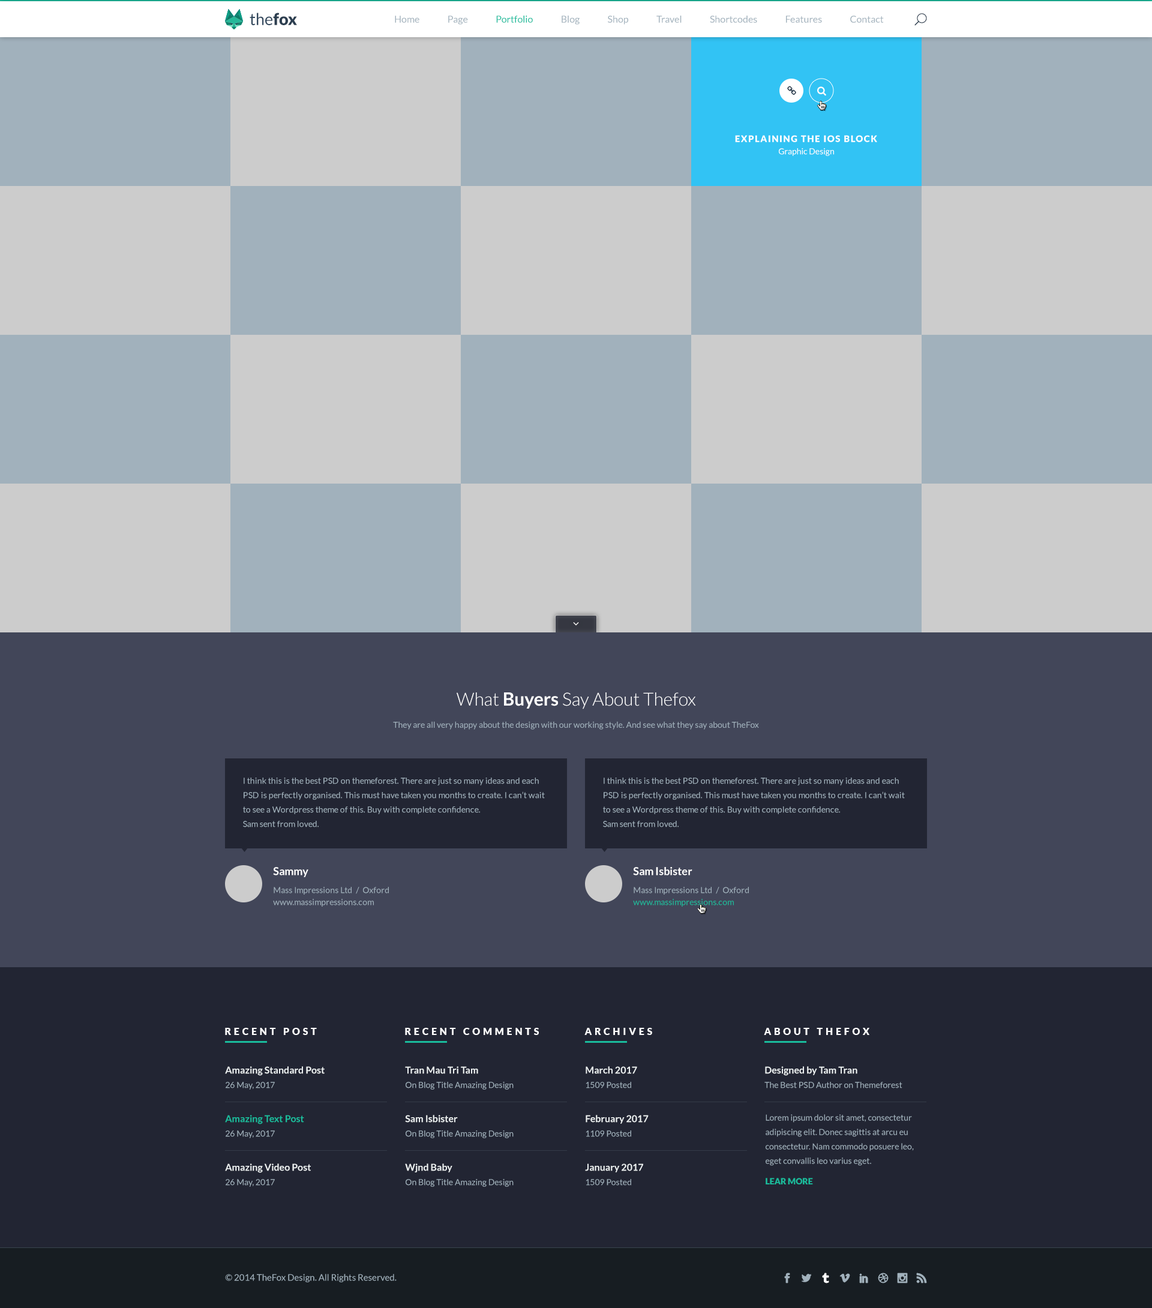
<style>
.page{position:relative;width:1152px;height:1308px;background:#222533}
.page>*{position:absolute;margin:0}
.t1{font:16.3px "Lato-Regular";color:#34495e}
.t2{font:16.3px "Lato-Black";color:#2c3e50}
.t3{font:9.6px "Lato-Regular";color:#a1b1bc}
.t4{font:9.6px "Lato-Regular";color:#1abc9c}
.t5{font:9px "Lato-Black";letter-spacing:0.1em;color:#ffffff;text-transform:uppercase}
.t6{font:8.4px "Lato-Regular";color:#ffffff}
.t7{font:18px "Lato-Light";color:#ffffff}
.t8{font:18px "Lato-Bold";color:#ffffff}
.t9{font:8.4px "Lato-Regular";color:#a1b1bc}
.t10{font:8.4px/14.4px "Lato-Regular";color:#a1b1bc}
.t11{font:8.4px/12px "Lato-Regular";color:#a1b1bc}
.t12{font:10.8px/15.6px "Lato-Bold";color:#ffffff}
.t13{font:10.8px/14.4px "Lato-Bold";color:#ffffff}
.t14{font:8.4px/12px "Lato-Regular";color:#1abc9c}
.t15{font:9.6px "Lato-Black";letter-spacing:0.3em;color:#ffffff}
.t16{font:9.6px/14.4px "Lato-Bold";color:#ecf0f1}
.t17{font:9.6px/14.4px "Lato-Bold";color:#1abc9c}
.t18{font:8.4px "Lato-Black";color:#1abc9c}
.t19{font:9px "Lato-Regular";color:#a1b1bc}
</style>
<div class="page">
<p class="t1" style="left:250px;top:13px;width:47px;height:12px">the<span class="t2">fox</span></p>
<p class="t3" style="left:395px;top:16px;width:489px;height:9px">Home               Page               <span class="t4">Portfolio</span>               Blog               Shop               Travel               Shortcodes               Features               Contact</p>
<p class="t5" style="left:735px;top:135px;width:142px;height:7px">Explaining the iOS Block</p>
<p class="t6" style="left:779px;top:148px;width:55px;height:8px">Graphic Design</p>
<p class="t7" style="left:457px;top:692px;width:239px;height:17px">What <span class="t8">Buyers</span> Say About Thefox</p>
<p class="t9" style="left:393px;top:721px;width:366px;height:9px">They are all very happy about the design with our working style. And see what they say about TheFox</p>
<p class="t10" style="left:243px;top:778px;width:302px;height:49px">I think this is the best PSD on themeforest. There are just so many ideas and each PSD is perfectly organised. This must have taken you months to create. I can’t wait to see a Wordpress theme of this. Buy with complete confidence.<br>Sam sent from loved.</p>
<p class="t10" style="left:603px;top:778px;width:302px;height:49px">I think this is the best PSD on themeforest. There are just so many ideas and each PSD is perfectly organised. This must have taken you months to create. I can’t wait to see a Wordpress theme of this. Buy with complete confidence.<br>Sam sent from loved.</p>
<p class="t11" style="left:273px;top:867px;width:116px;height:40px"><span class="t12">Sammy<br><br></span>Mass Impressions Ltd  /  Oxford<br>www.massimpressions.com</p>
<p class="t11" style="left:633px;top:867px;width:116px;height:40px"><span class="t12">Sam Isbister</span><span class="t13"><br><br></span>Mass Impressions Ltd  /  Oxford<br><span class="t14">www.massimpressions.com</span></p>
<p class="t15" style="left:225px;top:1028px;width:92px;height:7px">RECENT POST</p>
<p class="t15" style="left:405px;top:1028px;width:134px;height:7px">RECENT COMMENTS</p>
<p class="t15" style="left:584px;top:1028px;width:68px;height:7px">ARCHIVES</p>
<p class="t15" style="left:764px;top:1028px;width:105px;height:7px">ABOUT THEFOX</p>
<p class="t16" style="left:225px;top:1066px;width:100px;height:24px">Amazing Standard Post<br><span class="t10">26 May, 2017</span></p>
<p class="t10" style="left:405px;top:1066px;width:109px;height:24px"><span class="t16">Tran Mau Tri Tam<br></span>On Blog Title Amazing Design</p>
<p class="t10" style="left:586px;top:1066px;width:51px;height:22px"><span class="t16">March 2017<br></span>1509 Posted</p>
<p class="t10" style="left:764px;top:1066px;width:138px;height:22px"><span class="t16">Designed by Tam Tran<br></span>The Best PSD Author on Themeforest</p>
<p class="t17" style="left:225px;top:1115px;width:79px;height:23px">Amazing Text Post<br><span class="t10">26 May, 2017</span></p>
<p class="t10" style="left:405px;top:1115px;width:109px;height:23px"><span class="t16">Sam Isbister<br></span>On Blog Title Amazing Design</p>
<p class="t16" style="left:586px;top:1115px;width:63px;height:22px">February 2017<br><span class="t10">1109 Posted</span></p>
<p class="t10" style="left:766px;top:1114px;width:148px;height:52px">Lorem ipsum dolor sit amet, consectetur adipiscing elit. Donec sagittis at arcu eu consectetur. Nam commodo posuere leo, eget convallis leo varius eget.</p>
<p class="t16" style="left:225px;top:1163px;width:86px;height:24px">Amazing Video Post<br><span class="t10">26 May, 2017</span></p>
<p class="t10" style="left:405px;top:1163px;width:109px;height:24px"><span class="t16">Wjnd Baby<br></span>On Blog Title Amazing Design</p>
<p class="t16" style="left:585px;top:1163px;width:58px;height:23px">January 2017<br><span class="t10">1509 Posted</span></p>
<p class="t18" style="left:766px;top:1178px;width:47px;height:6px">LEAR MORE</p>
<p class="t19" style="left:225px;top:1274px;width:172px;height:8px">© 2014 TheFox Design. All Rights Reserved.</p>
</div>
